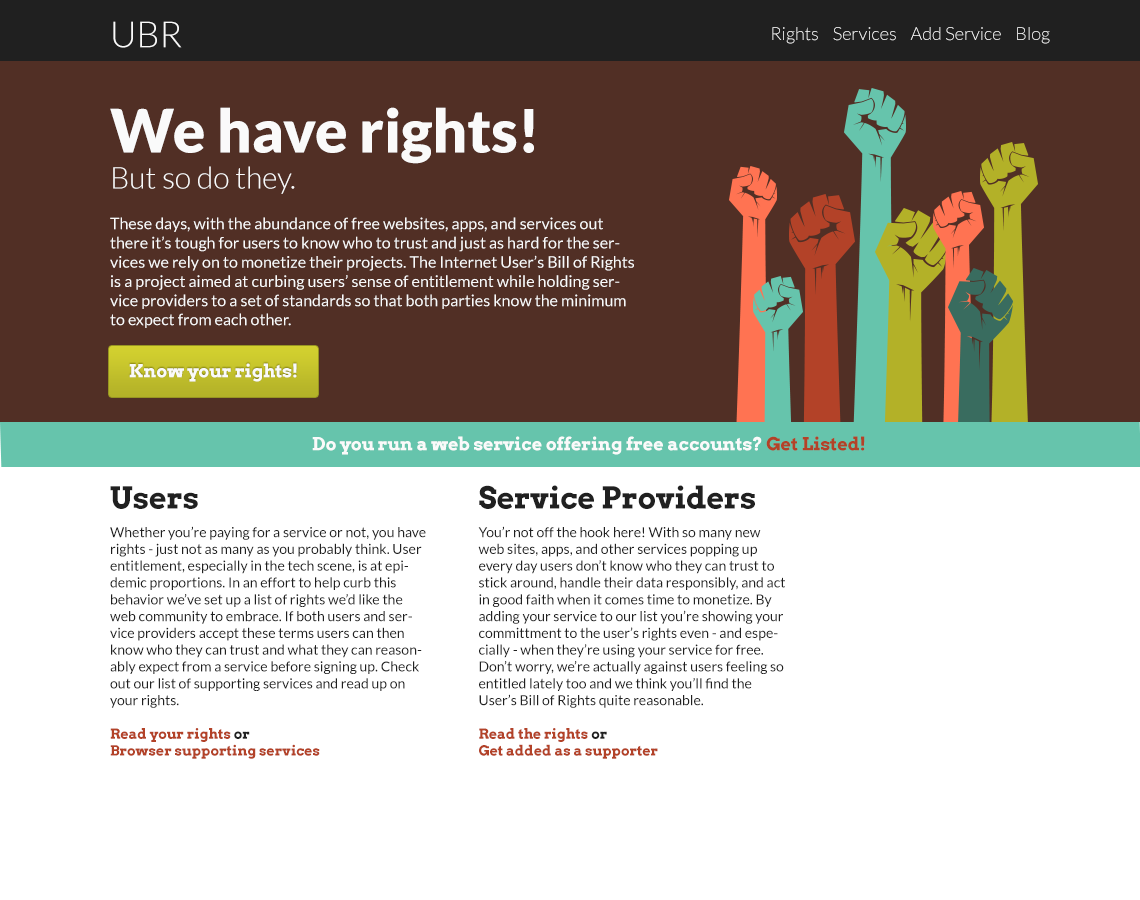
<style>
.page{position:relative;width:1140px;height:900px;background:#ffffff}
.page>*{position:absolute;margin:0}
.t1{font:36px "Lato-Light";color:#fafafa}
.t2{font:18px "Lato-Light";color:#fafafa}
.t3{font:16px "Lato-Regular";color:#fafafa}
.t4{font:60px "Lato-Black";color:#fafafa}
.t5{font:30px "Lato-Light";color:#fafafa}
.t6{font:18px "Arvo-Bold";color:#fafafa}
.t7{font:18px "Arvo-Bold";color:#b34228}
.t8{font:14px "Lato-Regular";color:#202020}
.t9{font:30px "Arvo-Bold";color:#202020}
.t10{font:14px "Arvo-Bold";color:#b34228}
.t11{font:14px "Arvo-Bold";color:#202020}
</style>
<div class="page">
<p class="t1" style="left:113px;top:21px;width:69px;height:27px">UBR</p>
<p class="t2" style="left:772px;top:27px;width:278px;height:17px">Rights    Services    Add Service    Blog</p>
<p class="t3" style="left:110px;top:107px;width:524px;height:221px"><span class="t4">We have rights!<br></span><span class="t5">But so do they.<br><br></span>These days, with the abundance of free websites, apps, and services out there it’s tough for users to know who to trust and just as hard for the services we rely on to monetize their projects. The Internet User’s Bill of Rights is a project aimed at curbing users’ sense of entitlement while holding service providers to a set of standards so that both parties know the minimum to expect from each other.</p>
<p class="t6" style="left:129px;top:363px;width:168px;height:19px">Know your rights!</p>
<p class="t6" style="left:312px;top:436px;width:553px;height:19px">Do you run a web service offering free accounts? <span class="t7">Get Listed!</span></p>
<p class="t8" style="left:110px;top:486px;width:316px;height:273px"><span class="t9">Users<br><br></span>Whether you’re paying for a service or not, you have rights - just not as many as you probably think. User entitlement, especially in the tech scene, is at epidemic proportions. In an effort to help curb this behavior we’ve set up a list of rights we’d like the web community to embrace. If both users and service providers accept these terms users can then know who they can trust and what they can reasonably expect from a service before signing up. Check out our list of supporting services and read up on your rights.<br><br><span class="t10">Read your rights</span><span class="t11"> or <br></span><span class="t10">Browser supporting services</span></p>
<p class="t8" style="left:478px;top:485px;width:307px;height:274px"><span class="t9">Service Providers<br><br></span>You’r not off the hook here! With so many new web sites, apps, and other services popping up every day users don’t know who they can trust to stick around, handle their data responsibly, and act in good faith when it comes time to monetize. By adding your service to our list you’re showing your committment to the user’s rights even - and especially - when they’re using your service for free. Don’t worry, we’re actually against users feeling so entitled lately too and we think you’ll find the User’s Bill of Rights quite reasonable.<br><br><span class="t10">Read the rights</span><span class="t11"> or <br></span><span class="t10">Get added as a supporter</span></p>
</div>
